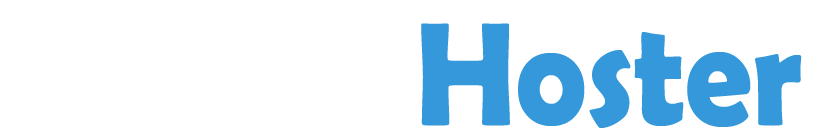
<style>
.page{position:relative;width:840px;height:140px;background:#ffffff}
.page>*{position:absolute;margin:0}
.t1{font:148px "BerlinSansFBDemi-Bold";color:#3498db;scale:0.9 1}
.t2{font:148px "BerlinSansFBDemi-Bold";color:#ffffff;scale:0.9 1}
</style>
<div class="page">
<p class="t1" style="left:147px;top:21px;width:655px;height:107px"><span class="t2">Web</span>Hoster</p>
</div>
